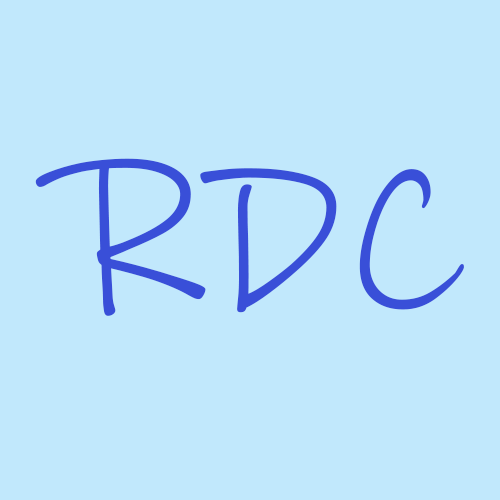
<style>
.page{position:relative;width:500px;height:500px;background:#c1e8fc}
.page>*{position:absolute;margin:0}
.t1{font:211.7px "InkFree";color:#394fd8}
</style>
<div class="page">
<p class="t1" style="left:35px;top:158px;width:429px;height:158px">RDC</p>
</div>
